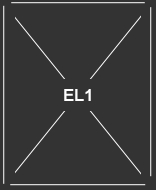
<style>
.page{position:relative;width:156px;height:190px;background:#333333}
.page>*{position:absolute;margin:0}
.t1{font:16.7px "Arial-BoldMT";color:#ffffff}
</style>
<div class="page">
<p class="t1" style="left:64px;top:89px;width:27px;height:12px">EL1</p>
</div>
